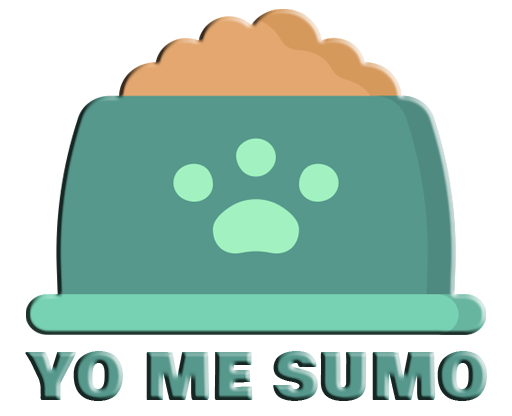
<style>
.page{position:relative;width:512px;height:416px;background:#ffffff}
.page>*{position:absolute;margin:0}
.t1{font:64px "BowlbyOneSC-Regular"}
</style>
<div class="page">
<p class="t1" style="left:25px;top:351px;width:462px;height:50px">YO ME SUMO</p>
</div>
